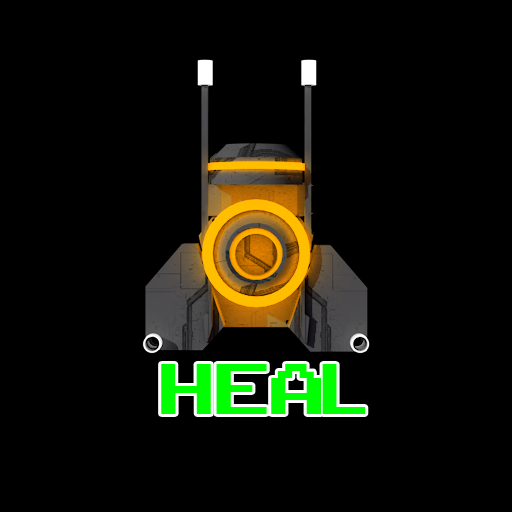
<style>
.page{position:relative;width:512px;height:512px;background:#000000}
.page>*{position:absolute;margin:0}
.t1{font:100px "ArcadeClassic";color:#00ff00}
</style>
<div class="page">
<p class="t1" style="left:161px;top:364px;width:205px;height:50px">Heal</p>
</div>
